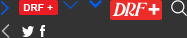
<style>
.page{position:relative;width:187px;height:38px;background:#333333}
.page>*{position:absolute;margin:0}
.t1{font:10px "Arial-BoldMT";letter-spacing:0.025em;color:#ffffff;text-transform:uppercase}
.t2{font:10px "ArialMT";letter-spacing:0.025em;color:#ffffff;text-transform:uppercase}
</style>
<div class="page">
<p class="t1" style="left:23px;top:4px;width:30px;height:7px">DRF <span class="t2">+</span></p>
</div>
